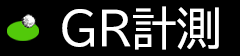
<style>
.page{position:relative;width:240px;height:56px;background:#000000}
.page>*{position:absolute;margin:0}
.t1{font:44.8px "BIZ-UDPGothic";color:#ffffff}
</style>
<div class="page">
<p class="t1" style="left:62px;top:6px;width:157px;height:44px">GR計測</p>
</div>
